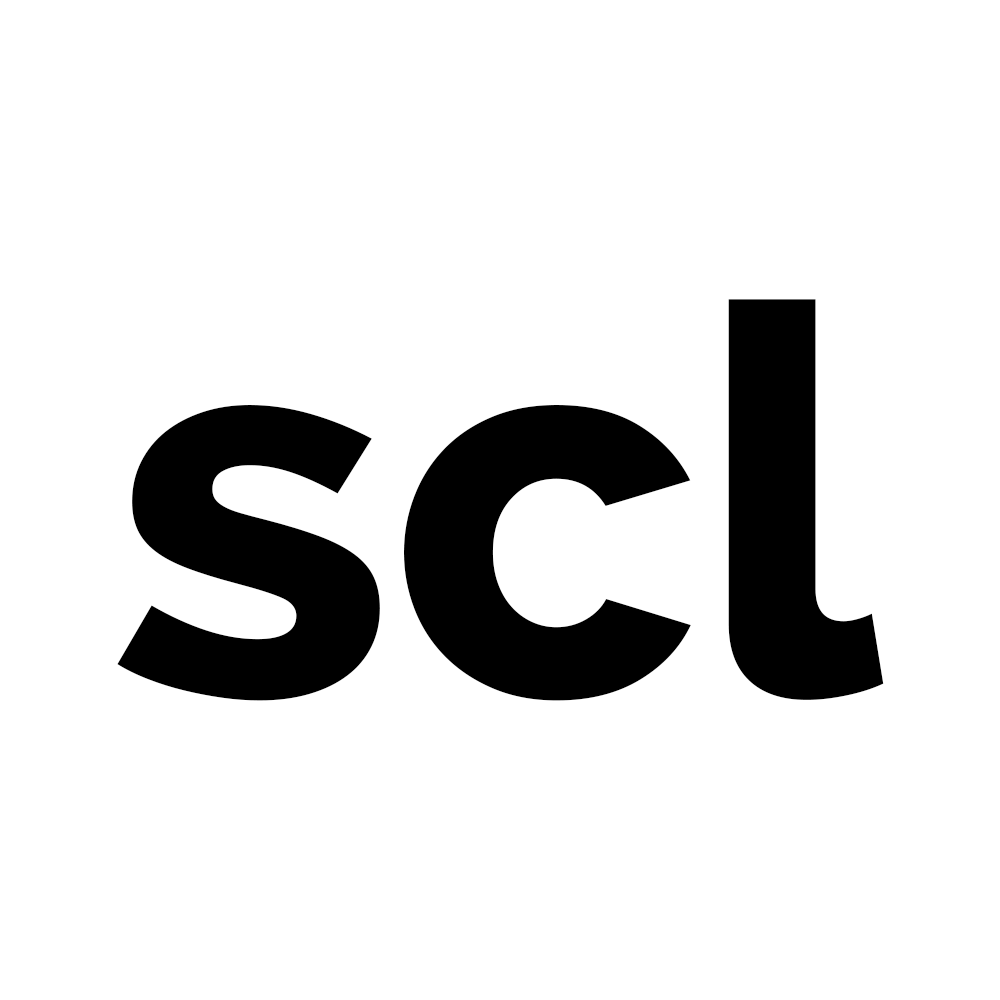
<style>
.page{position:relative;width:1000px;height:1000px;background:#ffffff}
.page>*{position:absolute;margin:0}
.t1{font:541.7px "Raleway-ExtraBold";color:#000000}
</style>
<div class="page">
<p class="t1" style="left:117px;top:299px;width:767px;height:402px">scl</p>
</div>
